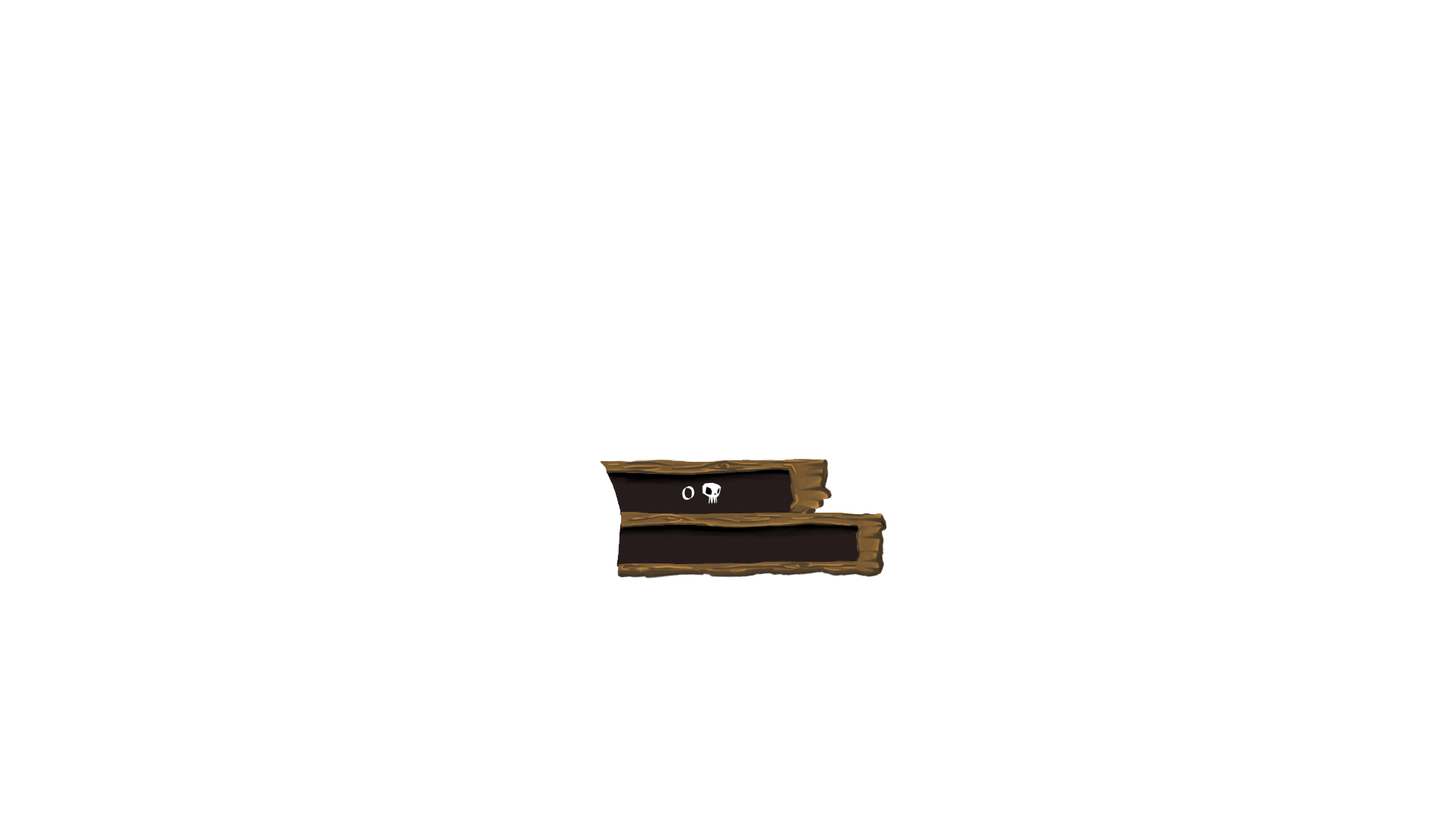
<style>
.page{position:relative;width:1456px;height:819px;background:#ffffff}
.page>*{position:absolute;margin:0}
.t1{font:18.2px "Viking-Normal";color:#ffffff}
</style>
<div class="page">
<p class="t1" style="left:682px;top:486px;width:13px;height:14px">0</p>
</div>
